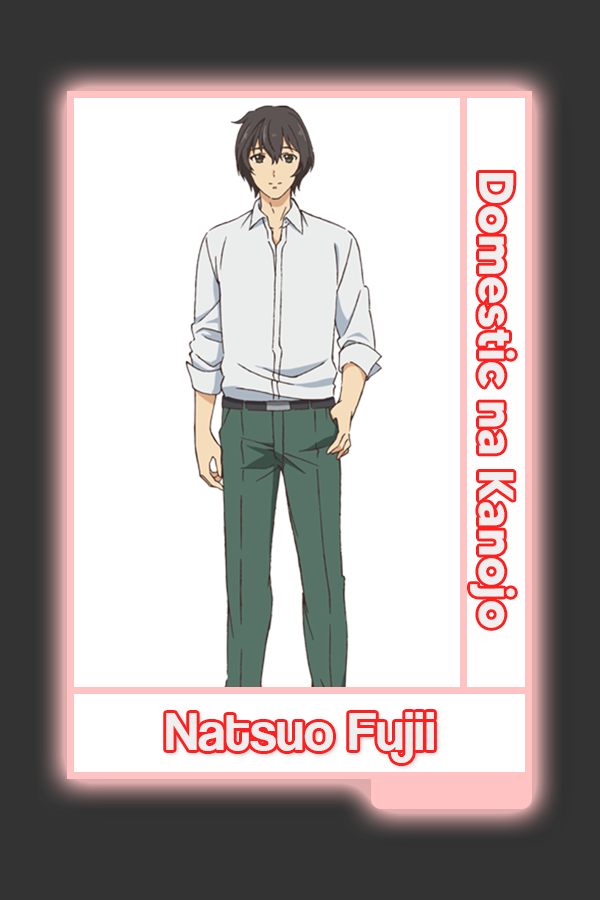
<style>
.page{position:relative;width:600px;height:900px;background:#ffffff}
.page>*{position:absolute;margin:0}
.t1{font:48.8px "MADETOMMY-Bold";color:#f0efef}
.t2{font:56.3px "CoolveticaRg-Regular";color:#f0efef}
</style>
<div class="page">
<p class="t1" style="left:470px;top:173px;width:45px;height:455px;rotate:90deg">Domestic na Kanojo</p>
<p class="t2" style="left:166px;top:712px;width:268px;height:51px">Natsuo Fujii</p>
</div>
